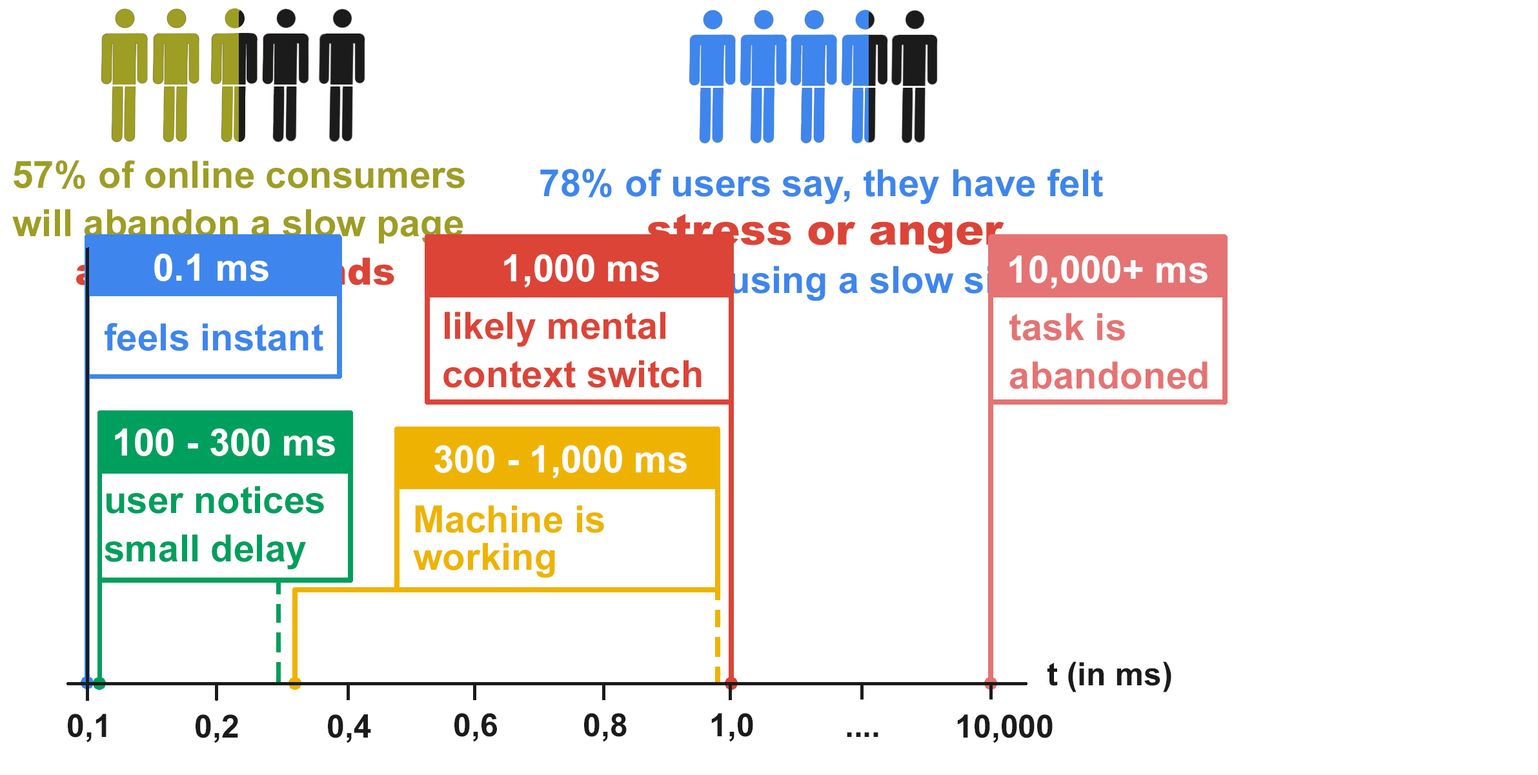
<style>
.page{position:relative;width:1538px;height:775px;background:#ffffff}
.page>*{position:absolute;margin:0}
.t1{font:37.7px/48.4px "Arial-BoldMT";color:#9e9d24}
.t2{font:37.7px/48.4px "Arial-Black";color:#dc4437}
.t3{font:37.7px/48.4px "Arial-BoldMT";color:#3e86ed}
.t4{font:43px/48.4px "Arial-Black";color:#dc4437}
.t5{font:37.7px "Arial-BoldMT";color:#ffffff}
.t6{font:37.7px/48.4px "Arial-BoldMT";color:#dc4437}
.t7{font:37.7px/48.4px "Arial-BoldMT";color:#e57373}
.t8{font:37.7px "Arial-BoldMT";color:#3e86ed}
.t9{font:37.7px/48.4px "Arial-BoldMT";color:#009f5d}
.t10{font:37.7px/37.7px "Arial-BoldMT";color:#eeb302}
.t11{font:32.3px "Arial-BoldMT";color:#1b1b1b}
</style>
<div class="page">
<p class="t1" style="left:12px;top:160px;width:453px;height:125px">57% of online consumers<br>will abandon a slow page<br><span class="t2">     after 3 seconds</span></p>
<p class="t3" style="left:540px;top:168px;width:563px;height:133px">78% of users say, they have felt<br>         <span class="t4">stress or anger<br></span>        while using a slow site</p>
<p class="t5" style="left:154px;top:254px;width:115px;height:27px">0.1 ms</p>
<p class="t5" style="left:504px;top:254px;width:155px;height:34px">1,000 ms</p>
<p class="t5" style="left:1010px;top:256px;width:198px;height:33px">10,000+ ms</p>
<p class="t6" style="left:443px;top:312px;width:259px;height:76px">likely mental<br>context switch</p>
<p class="t7" style="left:1010px;top:313px;width:198px;height:76px">task is<br>abandoned</p>
<p class="t8" style="left:105px;top:323px;width:218px;height:28px">feels instant</p>
<p class="t5" style="left:115px;top:429px;width:220px;height:27px">100 - 300 ms</p>
<p class="t5" style="left:434px;top:445px;width:253px;height:34px">300 - 1,000 ms</p>
<p class="t9" style="left:105px;top:486px;width:219px;height:84px">user notices<br>small delay</p>
<p class="t10" style="left:413px;top:505px;width:191px;height:73px">Machine is<br>working</p>
<p class="t11" style="left:1047px;top:662px;width:125px;height:31px">t (in ms)</p>
<p class="t11" style="left:68px;top:714px;width:39px;height:29px">0,1</p>
<p class="t11" style="left:454px;top:713px;width:43px;height:29px">0,6</p>
<p class="t11" style="left:584px;top:713px;width:43px;height:29px">0,8</p>
<p class="t11" style="left:711px;top:713px;width:42px;height:29px">1,0</p>
<p class="t11" style="left:196px;top:715px;width:42px;height:29px">0,2</p>
<p class="t11" style="left:328px;top:715px;width:43px;height:29px">0,4</p>
<p class="t11" style="left:957px;top:715px;width:96px;height:29px">10,000</p>
<p class="t11" style="left:847px;top:733px;width:31px;height:4px">....</p>
</div>
